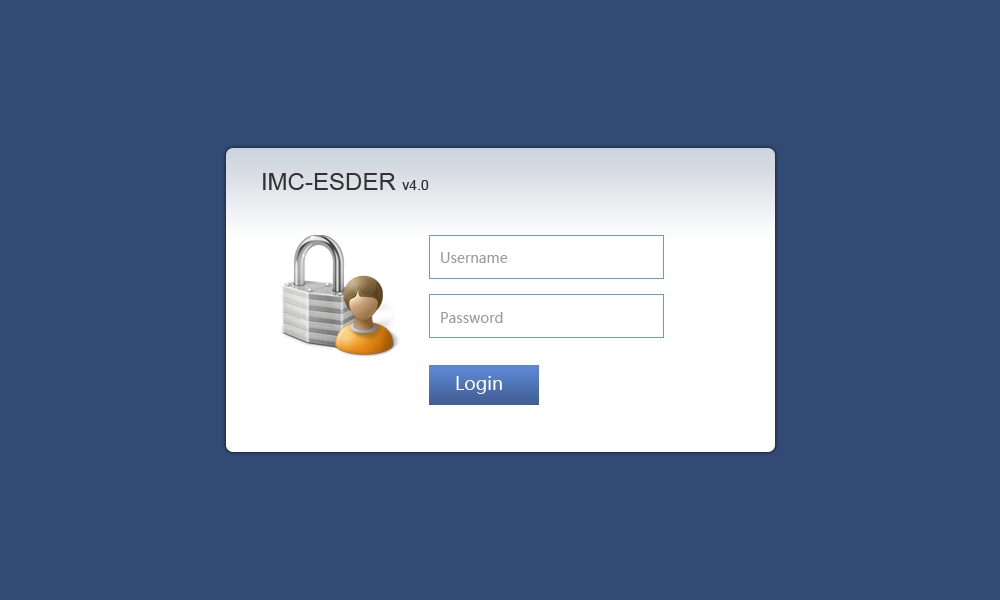
<style>
.page{position:relative;width:1000px;height:600px;background:#334a74}
.page>*{position:absolute;margin:0}
.t1{font:24px "ArialMT";color:#333333}
.t2{font:14px "ArialMT";color:#333333}
.t3{font:14px/60px "MicrosoftYaHei";color:#999999}
.t4{font:18px "MicrosoftYaHei";color:#ffffff}
</style>
<div class="page">
<p class="t1" style="left:263px;top:173px;width:166px;height:17px">IMC-ESDER <span class="t2">v4.0</span></p>
<p class="t3" style="left:441px;top:252px;width:67px;height:71px">Username<br>Password</p>
<p class="t4" style="left:456px;top:376px;width:46px;height:18px">Login</p>
</div>
